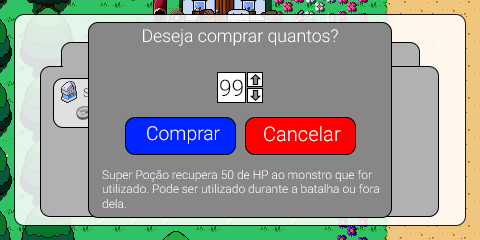
<style>
.page{position:relative;width:480px;height:240px;background:#878787}
.page>*{position:absolute;margin:0}
.t1{font:17.6px "Roboto-Light";color:#ffffff}
.t2{font:22.7px "Roboto-Light";color:#000000}
.t3{font:19.3px "Roboto-Light";color:#ffffff}
.t4{font:20.1px "Roboto-Light";color:#ffffff}
.t5{font:12px "Roboto-Light";color:#ffffff}
</style>
<div class="page">
<p class="t1" style="left:143px;top:29px;width:195px;height:17px">Deseja comprar quantos?</p>
<p class="t2" style="left:220px;top:79px;width:23px;height:17px">99</p>
<p class="t3" style="left:147px;top:126px;width:73px;height:18px">Comprar</p>
<p class="t4" style="left:264px;top:126px;width:77px;height:16px">Cancelar</p>
<p class="t5" style="left:102px;top:170px;width:277px;height:38px">Super Poção recupera 50 de HP ao monstro que for<br>utilizado. Pode ser utilizado durante a batalha ou fora<br>dela.</p>
</div>
